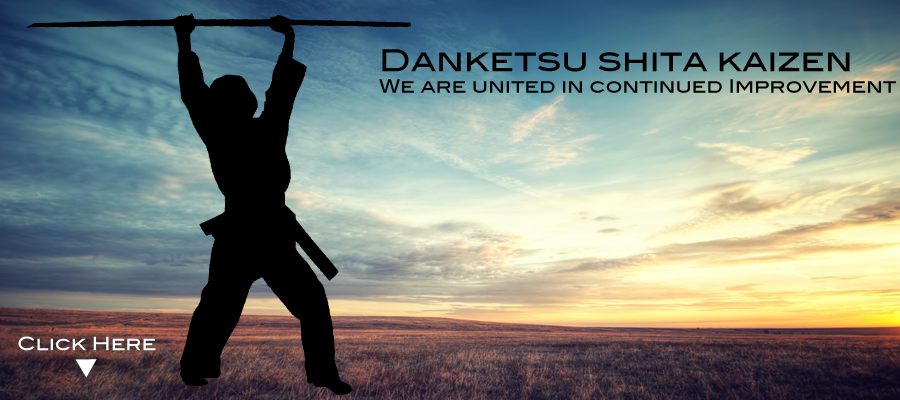
<style>
.page{position:relative;width:900px;height:400px}
.page>*{position:absolute;margin:0}
.t1{font:18px "BlairMdITCTTMedium";color:#000000}
.t2{font:30px "BlairMdITCTTMedium";color:#000000}
.t3{font:18px "BlairMdITCTTMedium";color:#ffffff}
</style>
<div class="page">
<p class="t1" style="left:379px;top:49px;width:517px;height:44px"><span class="t2">Danketsu shita kaizen<br></span>We are united in continued Improvement</p>
<p class="t3" style="left:18px;top:336px;width:138px;height:15px">Click Here</p>
</div>
